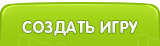
<style>
.page{position:relative;width:160px;height:46px}
.page>*{position:absolute;margin:0}
.t1{font:16px "RotondaC-Bold";letter-spacing:0.04em;color:#ffffff;text-transform:uppercase}
</style>
<div class="page">
<p class="t1" style="left:22px;top:21px;width:116px;height:15px">Создать игру</p>
</div>
